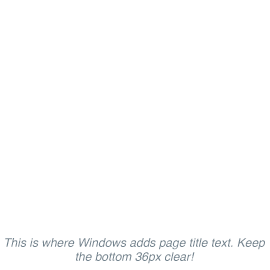
<style>
.page{position:relative;width:270px;height:270px;background:#ffffff}
.page>*{position:absolute;margin:0}
.t1{font:12px/14px "Helvetica-Oblique";color:#73838e}
</style>
<div class="page">
<p class="t1" style="left:5px;top:238px;width:260px;height:26px;text-align:center">This is where Windows adds page title text. Keep the bottom 36px clear!</p>
</div>
